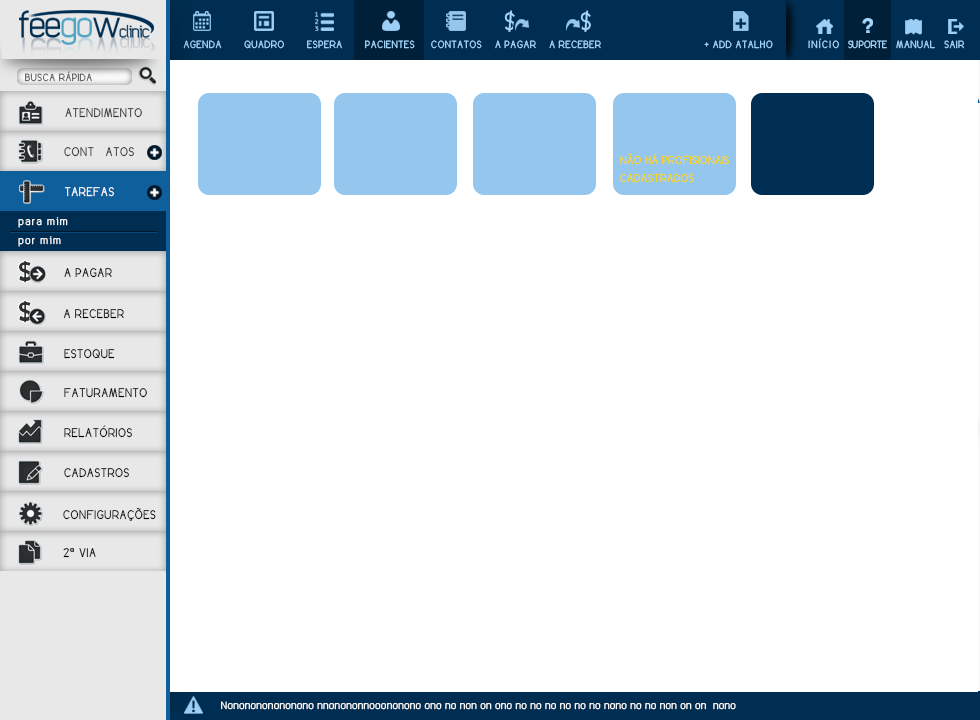
<style>
.page{position:relative;width:980px;height:720px;background:#ffffff}
.page>*{position:absolute;margin:0}
.t1{font:17.9px "EleganTech";letter-spacing:0.075em;color:#a4d7ff}
.t2{font:7.6px "EleganTech";letter-spacing:0.075em;color:#a4d7ff}
.t3{font:7.6px "EleganTech";letter-spacing:0.2em;color:#a4d7ff}
.t4{font:7.6px "EleganTech";letter-spacing:0.005em;color:#a4d7ff}
.t5{font:7.6px "EleganTech";letter-spacing:0.075em;color:#575757}
.t6{font:9px "EleganTech";letter-spacing:0.075em;color:#343434}
.t7{font:8.9px "EleganTech";letter-spacing:0.075em;color:#343434}
.t8{font:8.3px/18.2px "EleganTech";letter-spacing:0.075em}
.t9{font:8.9px "EleganTech";letter-spacing:0.075em;color:#ffffff}
.t10{font:7.6px "EleganTech";letter-spacing:0.2em;color:#ffffff}
.t11{font:22.9px "HoboStd";letter-spacing:0.075em;color:#2d2f30}
.t12{font:8.9px "EleganTech";letter-spacing:0.075em;color:#000000}
.t13{font:7.6px "EleganTech";letter-spacing:0.075em;color:#ffffff}
</style>
<div class="page">
<p class="t1" style="left:504px;top:10px;width:11px;height:22px">$</p>
<p class="t1" style="left:580px;top:10px;width:11px;height:22px">$</p>
<p class="t2" style="left:183px;top:40px;width:590px;height:9px">AGENDA       QUADRO       ESPERA       PACIENTES     CONTATOS    A PAGAR    A RECEBER                                      + ADD ATALHO</p>
<p class="t3" style="left:808px;top:38px;width:31px;height:11px">INÍCIO</p>
<p class="t4" style="left:848px;top:40px;width:39px;height:9px">SUPORTE</p>
<p class="t2" style="left:896px;top:40px;width:39px;height:9px">MANUAL</p>
<p class="t2" style="left:944px;top:40px;width:20px;height:9px">SAIR</p>
<p class="t5" style="left:25px;top:71px;width:67px;height:11px;opacity:0.97">BUSCA RÁPIDA</p>
<p class="t6" style="left:65px;top:108px;width:77px;height:10px">ATENDIMENTO</p>
<p class="t7" style="left:64px;top:147px;width:70px;height:10px">CONT   ATOS</p>
<p class="t8" style="left:620px;top:153px;width:109px;height:30px">NÃO HÁ PROFISIONAIS <br>CADASTRADOS</p>
<p class="t9" style="left:64px;top:187px;width:50px;height:10px">TAREFAS</p>
<p class="t10" style="left:18px;top:217px;width:50px;height:11px">para mim</p>
<p class="t10" style="left:18px;top:236px;width:43px;height:11px">por mim</p>
<p class="t11" style="left:19px;top:261px;width:13px;height:22px">$</p>
<p class="t12" style="left:64px;top:268px;width:48px;height:10px">A PAGAR</p>
<p class="t11" style="left:19px;top:301px;width:13px;height:22px">$</p>
<p class="t12" style="left:63px;top:309px;width:61px;height:10px">A RECEBER</p>
<p class="t12" style="left:64px;top:349px;width:51px;height:10px">ESTOQUE</p>
<p class="t12" style="left:64px;top:388px;width:83px;height:10px">FATURAMENTO</p>
<p class="t12" style="left:64px;top:425px;width:68px;height:13px">RELATÓRIOS</p>
<p class="t12" style="left:64px;top:468px;width:65px;height:10px">CADASTROS</p>
<p class="t12" style="left:63px;top:507px;width:93px;height:14px">CONFIGURAÇÕES</p>
<p class="t12" style="left:63px;top:548px;width:33px;height:10px">2ª VIA</p>
<p class="t13" style="left:221px;top:701px;width:515px;height:9px">Nononononononono nnonononnooononono ono no non on ono no no no no no no nono no no non on on  nono</p>
</div>
